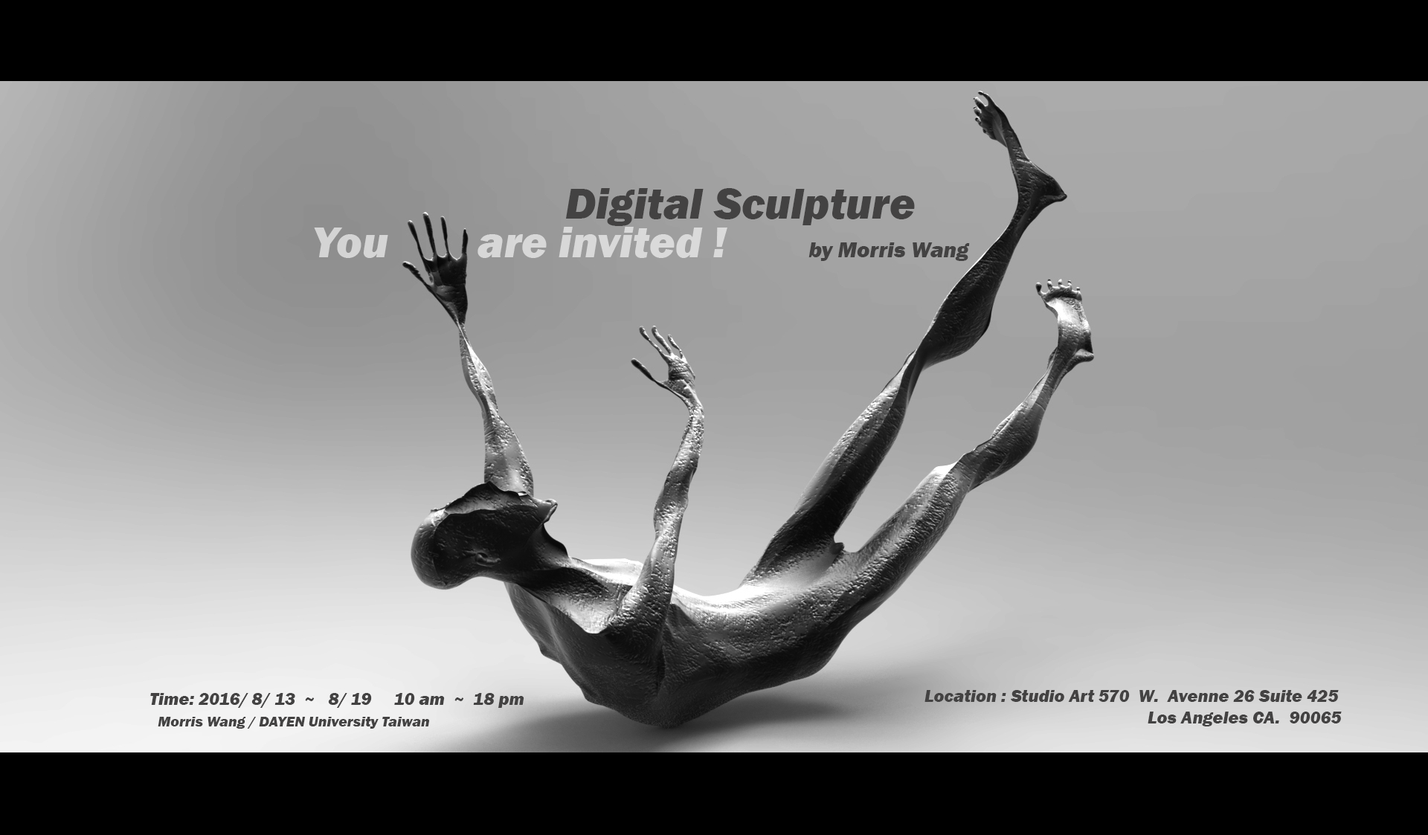
<style>
.page{position:relative;width:1428px;height:835px}
.page>*{position:absolute;margin:0}
.t1{font:44.6px "FranklinGothic-HeavyItalic";color:#434242}
.t2{font:44.6px "FranklinGothic-HeavyItalic";color:#d8d8d8}
.t3{font:22.3px "FranklinGothic-HeavyItalic";color:#434242}
.t4{font:17.8px "FranklinGothic-HeavyItalic";color:#434242}
.t5{font:14.9px "FranklinGothic-HeavyItalic";color:#434242}
</style>
<div class="page">
<p class="t1" style="left:566px;top:188px;width:349px;height:38px">Digital Sculpture</p>
<p class="t2" style="left:314px;top:227px;width:413px;height:31px">You        are invited !</p>
<p class="t3" style="left:808px;top:242px;width:162px;height:19px">by Morris Wang</p>
<p class="t4" style="left:150px;top:693px;width:374px;height:15px">Time: 2016/ 8/ 13  ~   8/ 19     10 am  ~  18 pm</p>
<p class="t4" style="left:924px;top:690px;width:418px;height:37px">Location : Studio Art 570  W.  Avenne 26 Suite 425<br>                                                  Los Angeles CA.  90065</p>
<p class="t5" style="left:158px;top:717px;width:272px;height:12px">Morris Wang / DAYEN University Taiwan</p>
</div>
